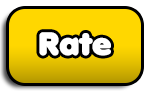
<style>
.page{position:relative;width:150px;height:91px;background:#ffd700}
.page>*{position:absolute;margin:0}
.t1{font:32px "Debussy";color:#ffffff}
</style>
<div class="page">
<p class="t1" style="left:39px;top:32px;width:72px;height:24px">Rate</p>
</div>
